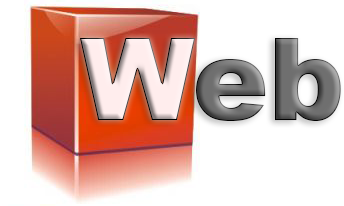
<style>
.page{position:relative;width:344px;height:206px;background:#ffffff}
.page>*{position:absolute;margin:0}
.t1{font:115px "Arial-Black";color:#6f6f6f}
.t2{font:115px "Arial-Black";color:#ffeded}
</style>
<div class="page">
<p class="t1" style="left:79px;top:38px;width:262px;height:83px"><span class="t2">W</span>eb</p>
</div>
